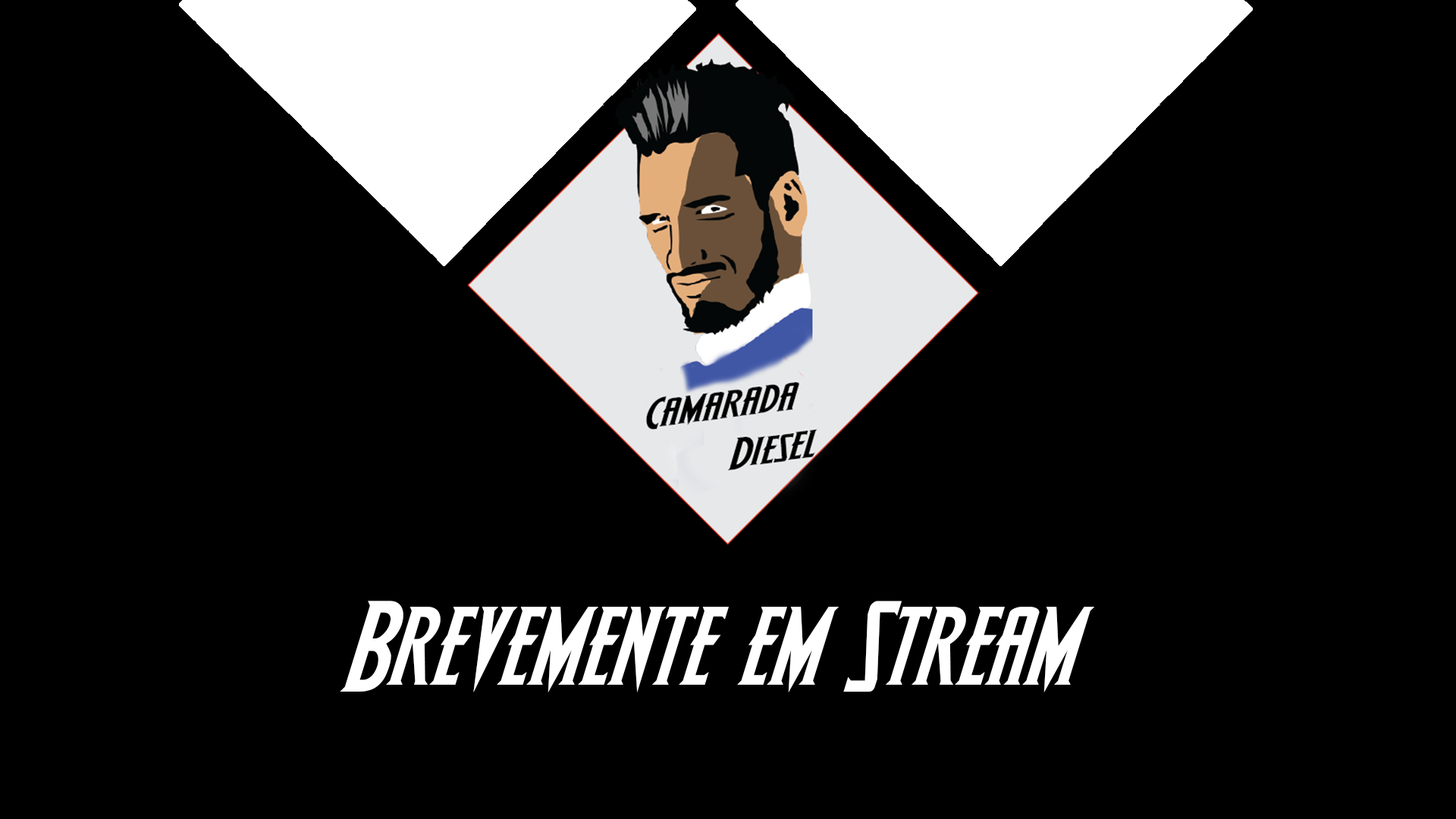
<style>
.page{position:relative;width:1456px;height:819px;background:#000000}
.page>*{position:absolute;margin:0}
.t1{font:122.2px "Wolf'sBaneItalic";color:#ffffff;scale:1.07 1}
</style>
<div class="page">
<p class="t1" style="left:340px;top:601px;width:755px;height:91px">Brevemente em Stream</p>
</div>
